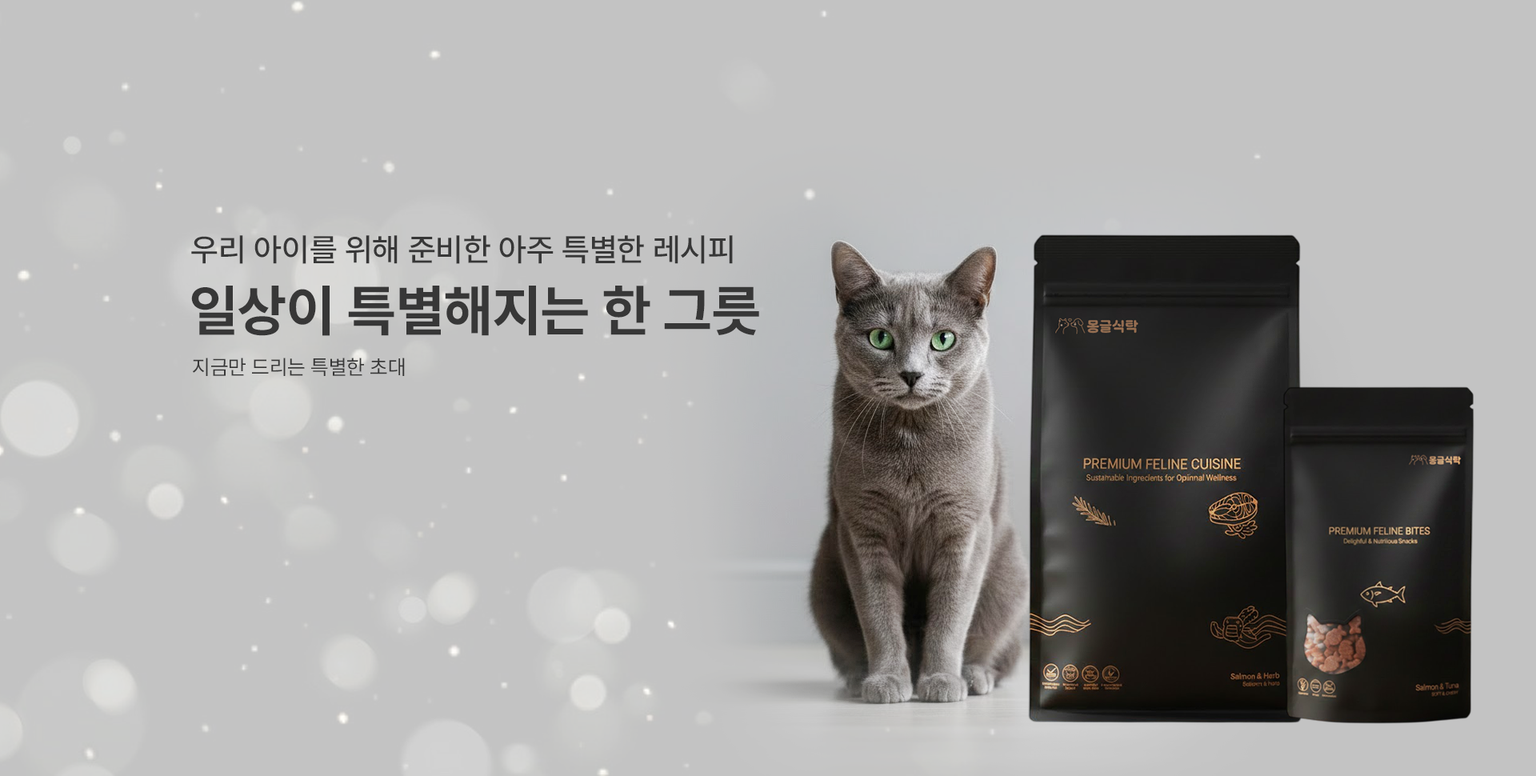
<style>
.page{position:relative;width:1536px;height:776px;background:#c3c3c3}
.page>*{position:absolute;margin:0}
.t1{font:32px "Pretendard-Medium";color:#373737;text-transform:uppercase}
.t2{font:56px "Pretendard-Bold";color:#373737;text-transform:uppercase}
.t3{font:20.8px "Pretendard-Regular";color:#373737;text-transform:uppercase}
</style>
<div class="page">
<p class="t1" style="left:191px;top:235px;width:542px;height:29px">우리 아이를 위해 준비한 아주 특별한 레시피</p>
<p class="t2" style="left:191px;top:286px;width:568px;height:50px">일상이 특별해지는 한 그릇</p>
<p class="t3" style="left:193px;top:358px;width:212px;height:18px">지금만 드리는 특별한 초대</p>
</div>
